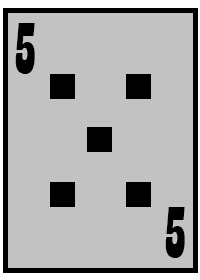
<style>
.page{position:relative;width:200px;height:280px;background:#c2c2c2}
.page>*{position:absolute;margin:0}
.t1{font:75px "Playbill";color:#000000}
</style>
<div class="page">
<p class="t1" style="left:15px;top:23px;width:20px;height:51px">5</p>
<p class="t1" style="left:165px;top:207px;width:20px;height:51px">5</p>
</div>
